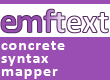
<style>
.page{position:relative;width:110px;height:80px;background:#9a4db3}
.page>*{position:absolute;margin:0}
.t1{font:16px/13px "Calibri-Bold";letter-spacing:0.06em;color:#ffffff}
</style>
<div class="page">
<p class="t1" style="left:1px;top:41px;width:64px;height:38px">concrete<br>syntax<br>mapper</p>
</div>
